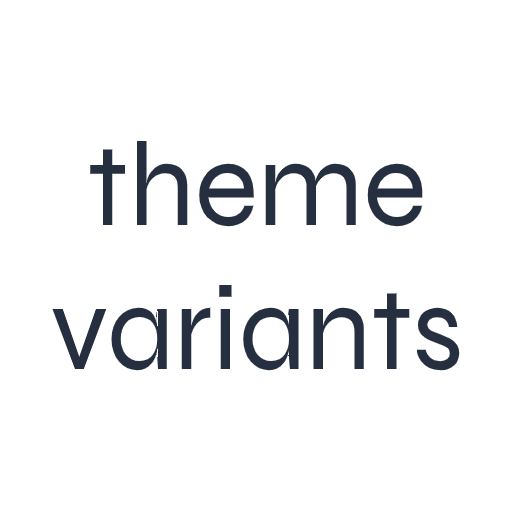
<style>
.page{position:relative;width:512px;height:512px;background:#ffffff}
.page>*{position:absolute;margin:0}
.t1{font:120px "Syne-Regular";color:#252f3f}
</style>
<div class="page">
<p class="t1" style="left:52px;top:141px;width:408px;height:230px;text-align:center">theme<br>variants</p>
</div>
